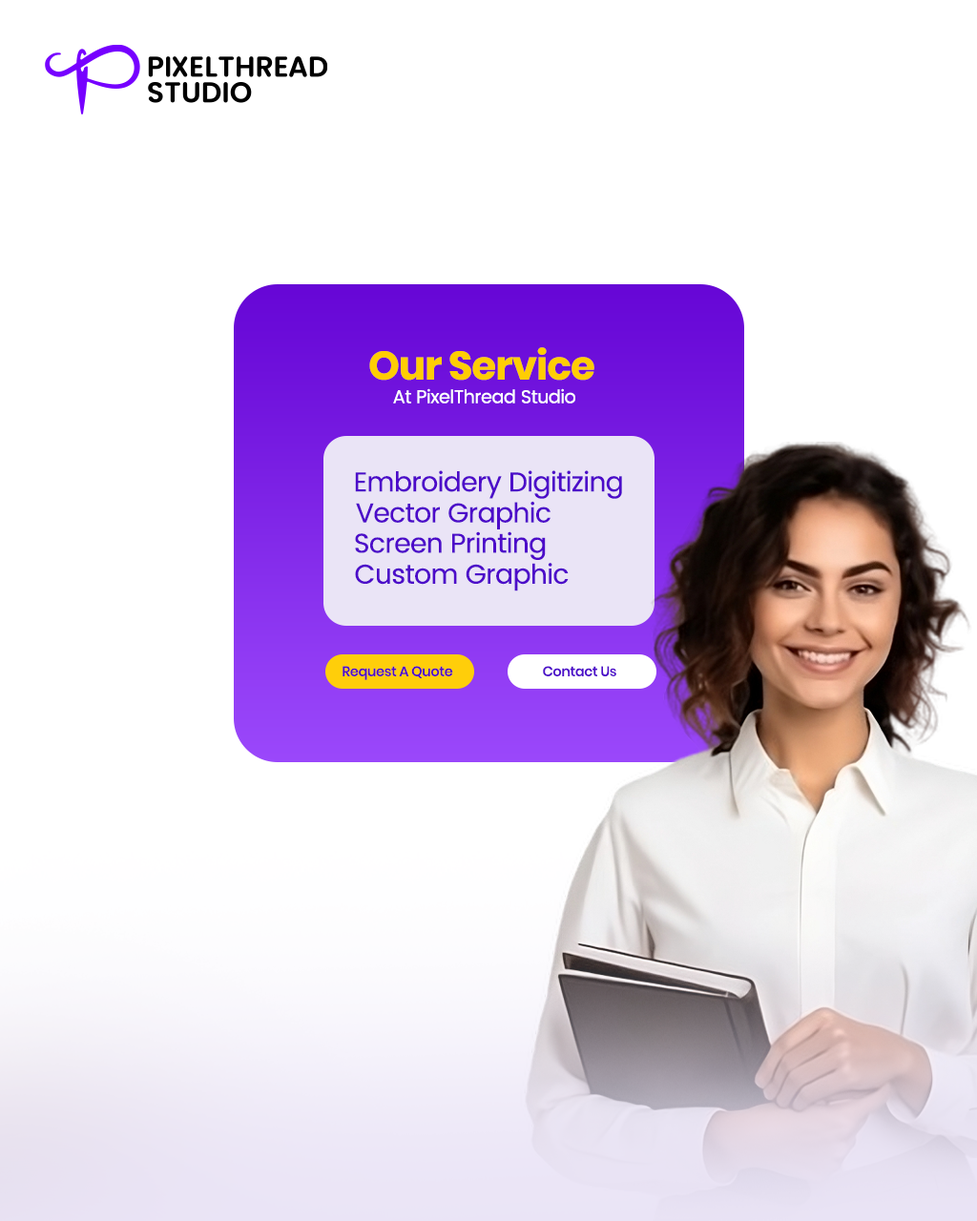
<style>
.page{position:relative;width:977px;height:1221px;background:#ffffff}
.page>*{position:absolute;margin:0}
.t1{font:39.7px "Poppins-Bold";letter-spacing:-0.02em;color:#ffcd03}
.t2{font:18.3px "Poppins-Regular";letter-spacing:-0.02em;color:#ffffff}
.t3{font:27px "Poppins-Regular";letter-spacing:-0.02em;color:#4d0ac9}
.t4{font:13.8px "Poppins-Medium";letter-spacing:-0.02em;color:#4d0ac9}
</style>
<div class="page">
<p class="t1" style="left:369px;top:347px;width:225px;height:34px">Our Service</p>
<p class="t2" style="left:393px;top:388px;width:182px;height:15px">At PixelThread Studio</p>
<p class="t3" style="left:355px;top:470px;width:267px;height:29px">Embroidery Digitizing</p>
<p class="t3" style="left:356px;top:501px;width:194px;height:28px">Vector Graphic</p>
<p class="t3" style="left:355px;top:531px;width:191px;height:29px">Screen Printing</p>
<p class="t3" style="left:355px;top:563px;width:213px;height:28px">Custom Graphic</p>
<p class="t4" style="left:342px;top:666px;width:111px;height:14px">Request A Quote</p>
<p class="t4" style="left:543px;top:666px;width:73px;height:10px">Contact Us</p>
</div>
